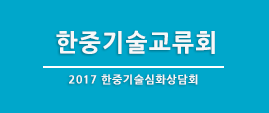
<style>
.page{position:relative;width:269px;height:113px;background:#00a7cb}
.page>*{position:absolute;margin:0}
.t1{font:24px "NanumGothicExtraBold";letter-spacing:0.05em;color:#f6f8f9}
.t2{font:11px "NanumGothicExtraBold";letter-spacing:0.05em;color:#f6f8f9}
</style>
<div class="page">
<p class="t1" style="left:56px;top:30px;width:159px;height:24px">한중기술교류회</p>
<p class="t2" style="left:69px;top:74px;width:129px;height:11px">2017 한중기술심화상담회</p>
</div>
